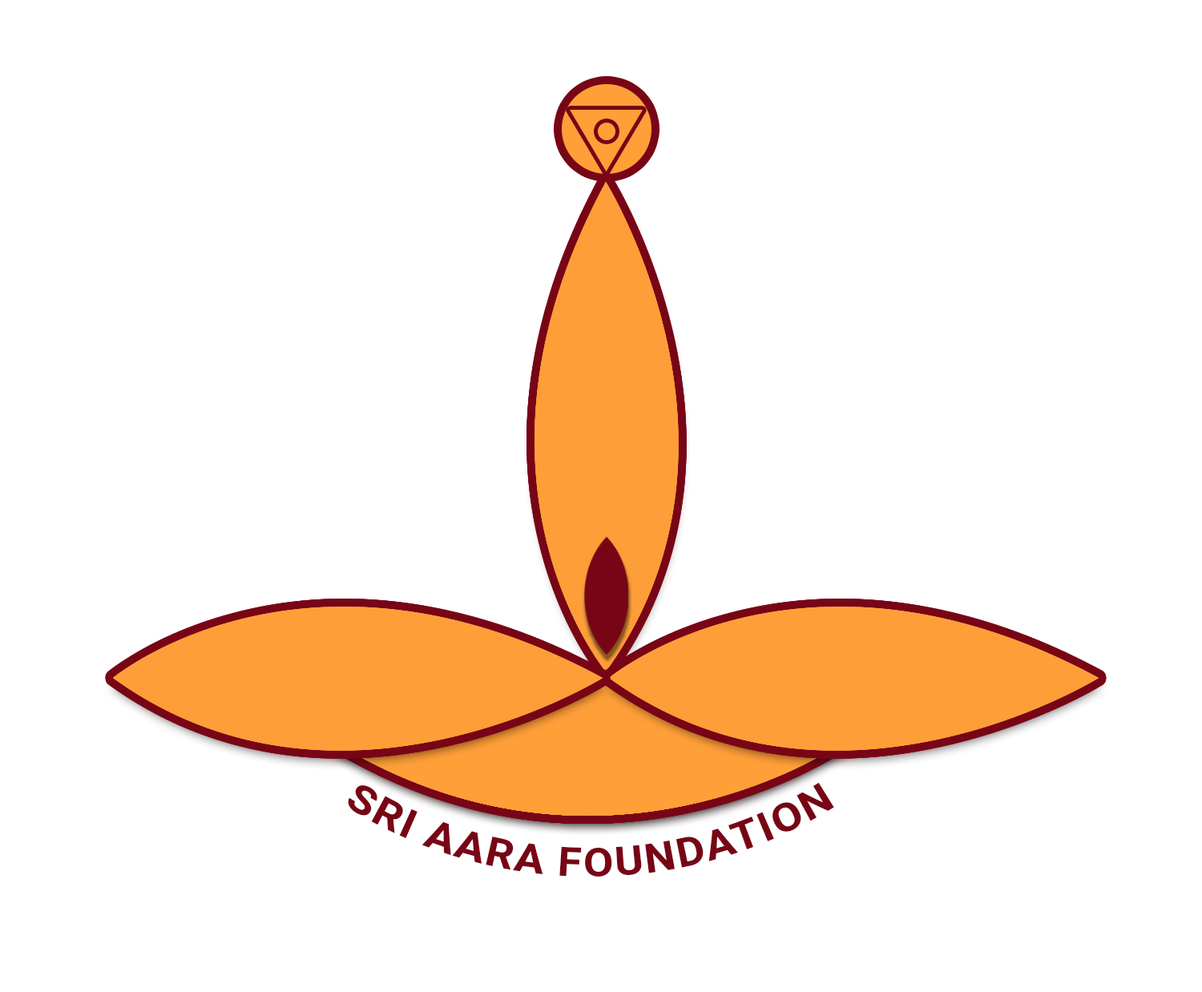
<style>
.page{position:relative;width:1202px;height:992px;background:#ffffff}
.page>*{position:absolute;margin:0}
.t1{font:40.1px/19.4px "Roboto-Bold";letter-spacing:0.03em;color:#780516}
</style>
<div class="page">
<p class="t1" style="left:348px;top:782px;width:486px;height:95px;text-align:justify">SRI AARA FOUNDATION</p>
</div>
